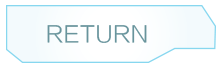
<style>
.page{position:relative;width:222px;height:69px;background:#ffffff}
.page>*{position:absolute;margin:0}
.t1{font:22.6px "FZLTXHK";color:#68949c;text-transform:uppercase}
</style>
<div class="page">
<p class="t1" style="left:47px;top:25px;width:100px;height:18px">RETURN</p>
</div>
